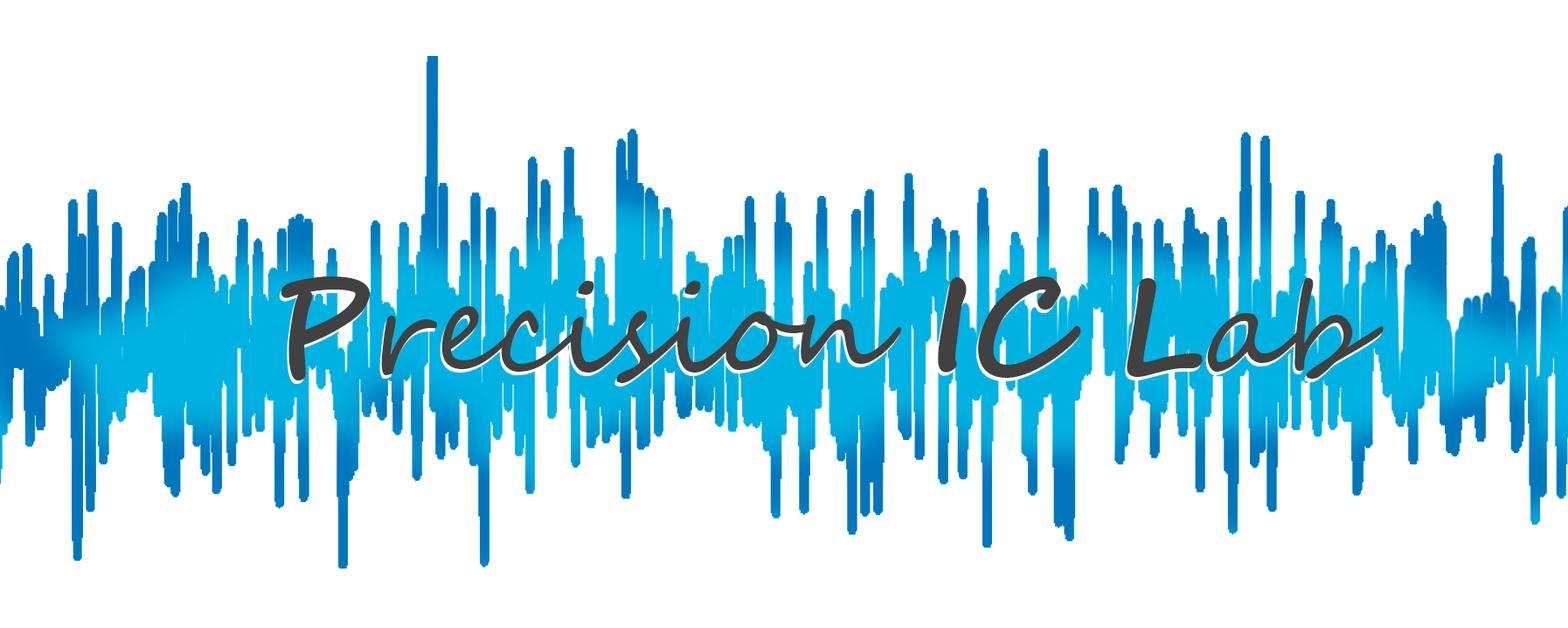
<style>
.page{position:relative;width:1568px;height:628px;background:#ffffff}
.page>*{position:absolute;margin:0}
.t1{font:120.2px "SegoeScript";color:#414141}
.t2{font:131.1px "SegoeScript-Bold";color:#414141}
</style>
<div class="page">
<p class="t1" style="left:281px;top:276px;width:1103px;height:107px"><span class="t2">P</span>recision <span class="t2">IC L</span>ab</p>
</div>
